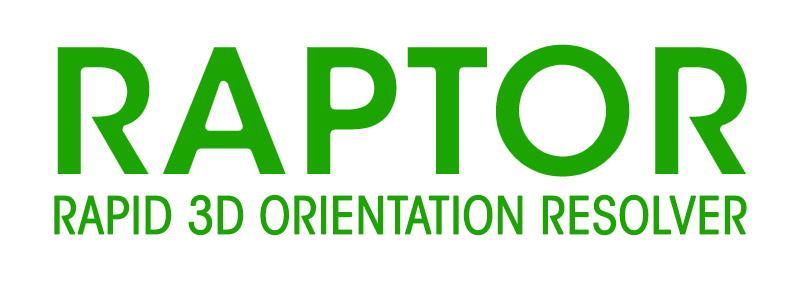
<style>
.page{position:relative;width:800px;height:291px;background:#ffffff}
.page>*{position:absolute;margin:0}
.t1{font:175.5px "ITCAvantGardeStd-Demi";color:#1ca501;font-weight:bold}
.t2{font:50.6px "ITCAvantGardeStd-BkCn";color:#1ca501;font-weight:bold}
</style>
<div class="page">
<p class="t1" style="left:53px;top:40px;width:698px;height:141px">RAPTOR</p>
<p class="t2" style="left:54px;top:194px;width:693px;height:42px">RAPID 3D ORIENTATION RESOLVER</p>
</div>
